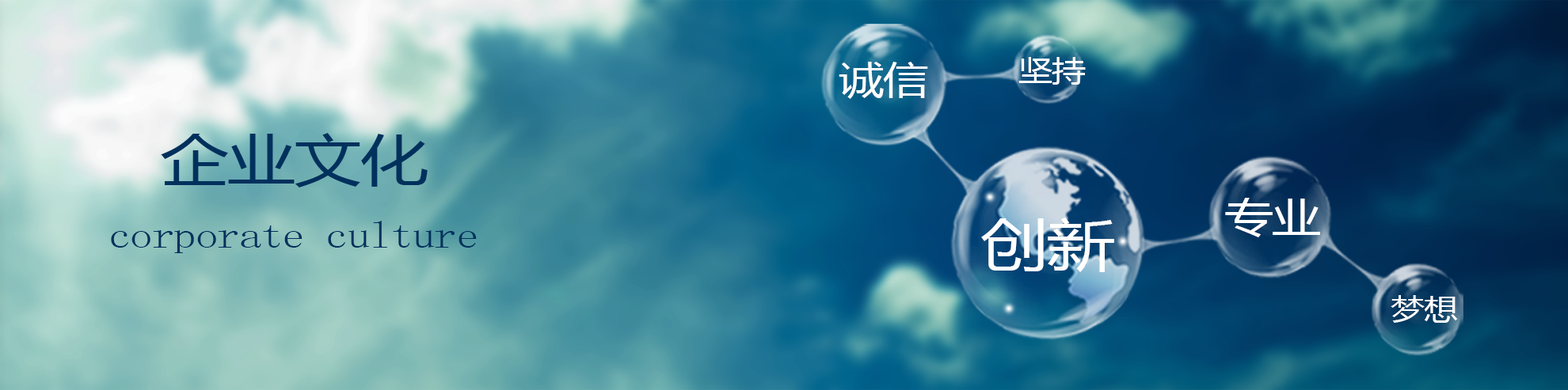
<style>
.page{position:relative;width:1568px;height:390px}
.page>*{position:absolute;margin:0}
.t1{font:38px "MicrosoftYaHei";letter-spacing:-0.02em;color:#ffffff;scale:1.19 1}
.t2{font:28.5px "MicrosoftYaHei";letter-spacing:-0.02em;color:#ffffff;scale:1.19 1}
.t3{font:57px "MicrosoftYaHei";letter-spacing:-0.02em;color:#00315d;scale:1.19 1}
.t4{font:40.6px "MicrosoftYaHei";letter-spacing:-0.02em;color:#ffffff;scale:1.2 1}
.t5{font:38px "SimSun";letter-spacing:-0.02em;color:#00315d;scale:1.19 1}
.t6{font:57px "MicrosoftYaHei";letter-spacing:-0.02em;color:#ffffff;scale:1.19 1}
</style>
<div class="page">
<p class="t1" style="left:839px;top:62px;width:89px;height:37px">诚信</p>
<p class="t2" style="left:1018px;top:57px;width:68px;height:28px">坚持</p>
<p class="t3" style="left:161px;top:133px;width:267px;height:55px">企业文化</p>
<p class="t4" style="left:1225px;top:198px;width:95px;height:40px">专业</p>
<p class="t5" style="left:111px;top:221px;width:366px;height:32px">corporate culture</p>
<p class="t6" style="left:981px;top:218px;width:133px;height:54px">创新</p>
<p class="t2" style="left:1391px;top:295px;width:67px;height:28px">梦想</p>
</div>
